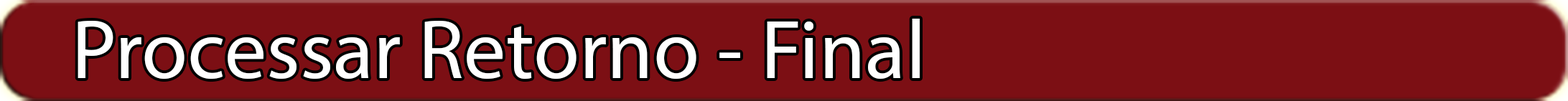
<style>
.page{position:relative;width:1568px;height:101px;background:#7c0f14}
.page>*{position:absolute;margin:0}
.t1{font:83.8px "MyriadPro-Regular";color:#ffffff}
</style>
<div class="page">
<p class="t1" style="left:78px;top:19px;width:842px;height:61px">Processar Retorno - Final</p>
</div>
